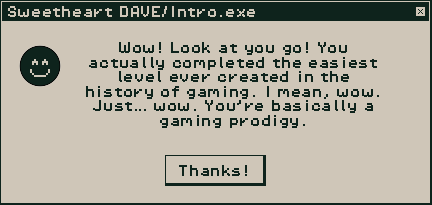
<style>
.page{position:relative;width:432px;height:205px;background:#cfc6b8}
.page>*{position:absolute;margin:0}
.t1{font:12.1px "PixelOperator8";color:#cfc6b8}
.t2{font:12.1px "PixelOperator8";color:#0e231c}
</style>
<div class="page">
<p class="t1" style="left:8px;top:6px;width:247px;height:11px">Sweetheart DAVE/Intro.exe</p>
<p class="t2" style="left:86px;top:42px;width:293px;height:86px;text-align:center">Wow! Look at you go! You actually completed the easiest level ever created in the history of gaming. I mean, wow. Just… wow. You’re basically a gaming prodigy.</p>
<p class="t2" style="left:179px;top:165px;width:68px;height:11px">Thanks!</p>
</div>
